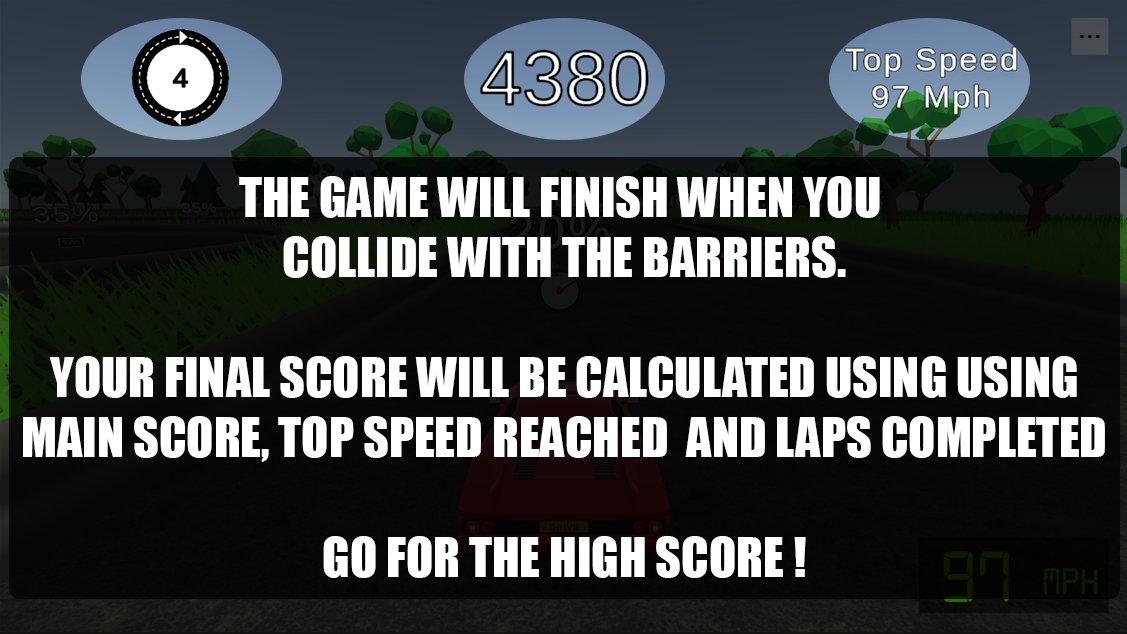
<style>
.page{position:relative;width:1127px;height:634px}
.page>*{position:absolute;margin:0}
.t1{font:50px "Impact";color:#ffffff;text-transform:uppercase}
</style>
<div class="page">
<p class="t1" style="left:23px;top:176px;width:1082px;height:402px;text-align:center">The game will finish when you <br>collide with the barriers.<br><br>your final score will be calculated using using<br>main score, top speed reached  and laps completed<br><br>Go for the high score !</p>
</div>
